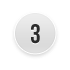
<style>
.page{position:relative;width:70px;height:70px;background:#ffffff}
.page>*{position:absolute;margin:0}
.t1{font:26.6px "BebasNeue";color:#2b2b2b}
</style>
<div class="page">
<p class="t1" style="left:31px;top:25px;width:9px;height:20px">3</p>
<p class="t1" style="left:31px;top:24px;width:9px;height:20px">3</p>
</div>
